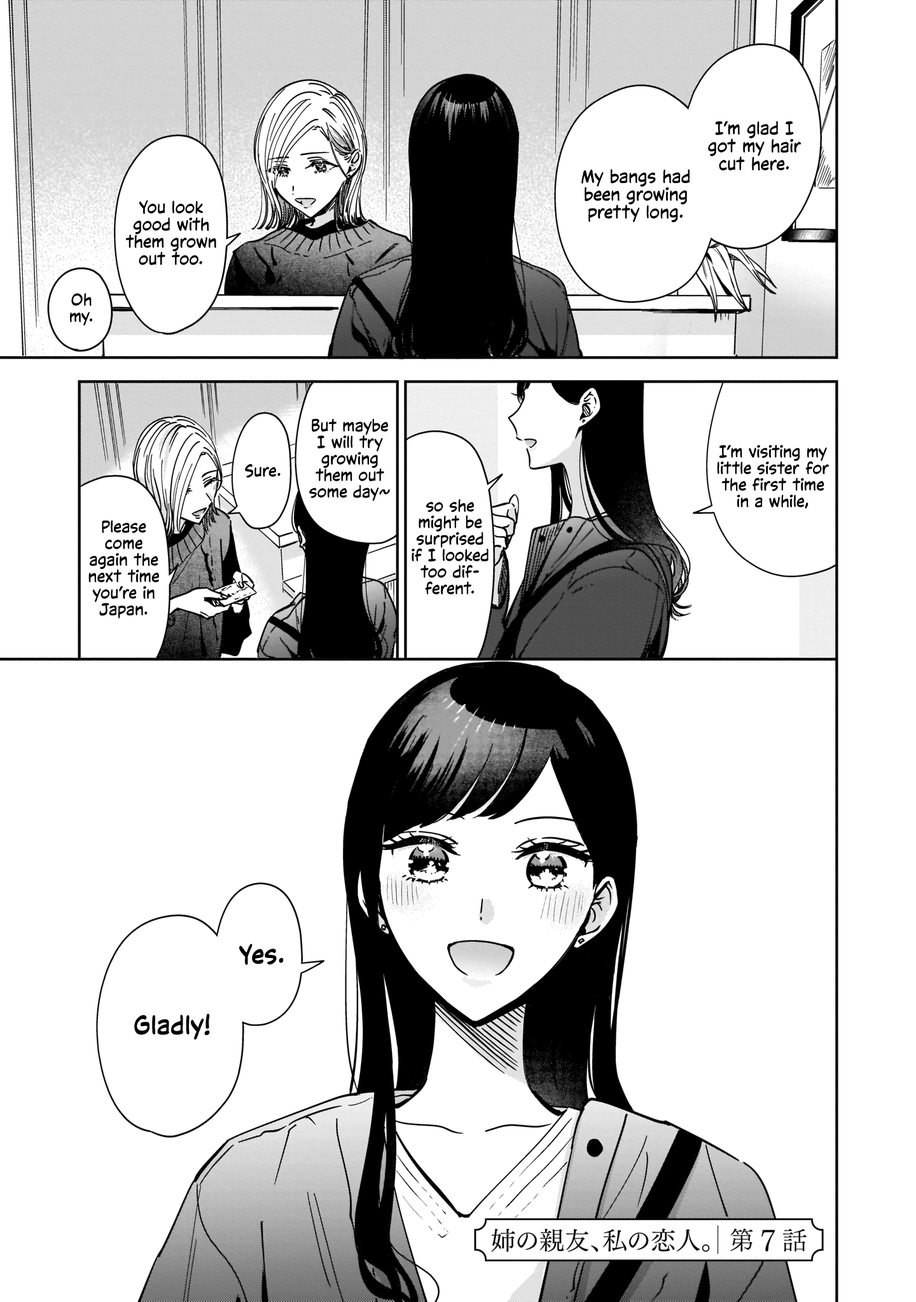
<style>
.page{position:relative;width:916px;height:1302px;background:#ffffff}
.page>*{position:absolute;margin:0}
.t1{font:17.8px "CCVictorySpeechLower-Regular";color:#000000}
.t2{font:17.2px "CCVictorySpeechLower-Regular";color:#000000}
.t3{font:16.5px "CCVictorySpeechLower-Regular";color:#000000}
.t4{font:25.4px "CCVictorySpeechLower-Regular";color:#000000;font-weight:bold}
</style>
<div class="page">
<p class="t1" style="left:708px;top:121px;width:93px;height:50px;text-align:center">I’m glad I<br>got my hair<br>cut here.</p>
<p class="t1" style="left:581px;top:169px;width:109px;height:54px;text-align:center">My bangs had<br>been growing<br>pretty long.</p>
<p class="t2" style="left:125px;top:200px;width:91px;height:65px;text-align:center">You look<br>good with<br>them grown<br>out too.</p>
<p class="t3" style="left:70px;top:293px;width:22px;height:33px;text-align:center">Oh<br>my.</p>
<p class="t3" style="left:309px;top:418px;width:81px;height:83px;text-align:center">But maybe<br>I will try<br>growing<br>them out<br>some day~</p>
<p class="t3" style="left:717px;top:444px;width:112px;height:65px;text-align:center">I’m visiting my<br>little sister for<br>the first time<br>in a while,</p>
<p class="t3" style="left:245px;top:464px;width:35px;height:14px">Sure.</p>
<p class="t3" style="left:411px;top:499px;width:77px;height:96px;text-align:center">so she<br>might be<br>surprised<br>if I looked<br>too dif-<br>ferent.</p>
<p class="t3" style="left:88px;top:520px;width:71px;height:99px;text-align:center">Please<br>come<br>again the<br>next time<br>you’re in<br>Japan.</p>
<p class="t4" style="left:239px;top:944px;width:45px;height:21px">Yes.</p>
<p class="t4" style="left:134px;top:1014px;width:76px;height:26px">Gladly!</p>
</div>
